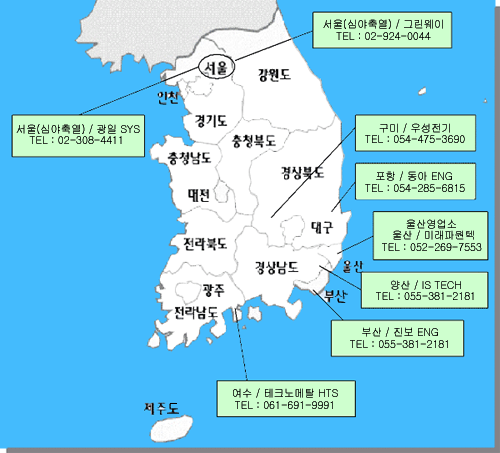
<style>
.page{position:relative;width:500px;height:453px;background:#44bbfd}
.page>*{position:absolute;margin:0}
.t1{font:10.8px/11.7px "Gulim";color:#000000;scale:0.95 1}
</style>
<div class="page">
<p class="t1" style="left:323px;top:19px;width:120px;height:21px">서울(심야축열) / 그린웨이<br>    TEL : 02-924-0044</p>
<p class="t1" style="left:16px;top:124px;width:124px;height:20px">서울(심야축열) / 광일 SYS<br>    TEL : 02-308-4411</p>
<p class="t1" style="left:365px;top:123px;width:100px;height:20px">구미 / 우성전기<br>TEL : 054-475-3690</p>
<p class="t1" style="left:365px;top:171px;width:100px;height:21px">포항 / 동아 ENG<br>TEL : 054-285-6815</p>
<p class="t1" style="left:382px;top:219px;width:100px;height:32px">울산영업소<br>   울산 / 미래파원텍<br>TEL : 052-269-7553</p>
<p class="t1" style="left:376px;top:280px;width:98px;height:20px;text-align:center">양산 / IS TECH<br>TEL : 055-381-2181</p>
<p class="t1" style="left:350px;top:327px;width:98px;height:21px;text-align:center">부산 / 진보 ENG<br>TEL : 055-381-2181</p>
<p class="t1" style="left:233px;top:388px;width:105px;height:21px;text-align:center">여수 / 테크노메탈 HTS<br>TEL : 061-691-9991</p>
</div>
